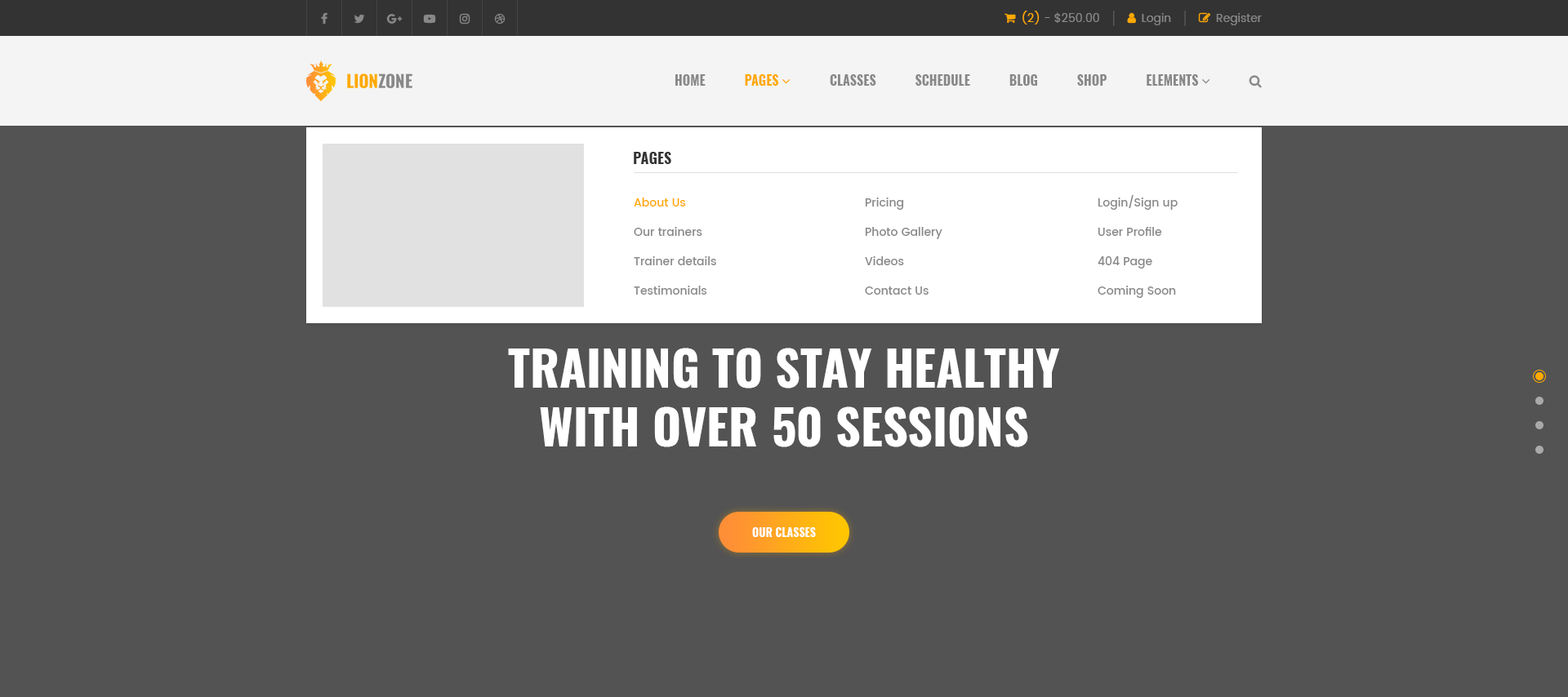
<style>
.page{position:relative;width:1568px;height:697px;background:#535353}
.page>*{position:absolute;margin:0}
.t1{font:14.7px "Oswald-Bold";color:#333333;text-transform:uppercase}
.t2{font:11.4px/29.4px "Poppins-Medium";color:#888888}
.t3{font:11.4px/29.4px "Poppins-Medium";color:#ffa901}
.t4{font:49px "Oswald-Bold";color:#ffffff;text-transform:uppercase}
.t5{font:11.4px "Oswald-Bold";color:#ffffff;text-transform:uppercase}
</style>
<div class="page">
<p class="t1" style="left:634px;top:152px;width:37px;height:12px">pages</p>
<p class="t2" style="left:634px;top:198px;width:82px;height:97px"><span class="t3">About Us<br></span>Our trainers<br>Trainer details<br>Testimonials</p>
<p class="t2" style="left:865px;top:198px;width:77px;height:97px">Pricing<br>Photo Gallery<br>Videos<br>Contact Us</p>
<p class="t2" style="left:1098px;top:195px;width:80px;height:103px">Login/Sign up<br>User Profile<br>404 Page<br>Coming Soon</p>
<p class="t4" style="left:508px;top:348px;width:552px;height:100px;text-align:center">training to stay healthy<br>with over 50 sessions</p>
<p class="t5" style="left:752px;top:528px;width:64px;height:9px">our classes</p>
</div>
